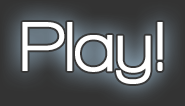
<style>
.page{position:relative;width:185px;height:106px}
.page>*{position:absolute;margin:0}
.t1{font:72px "WalkwayUltraBold";color:#ffffff}
</style>
<div class="page">
<p class="t1" style="left:22px;top:22px;width:141px;height:62px">Play!</p>
</div>
